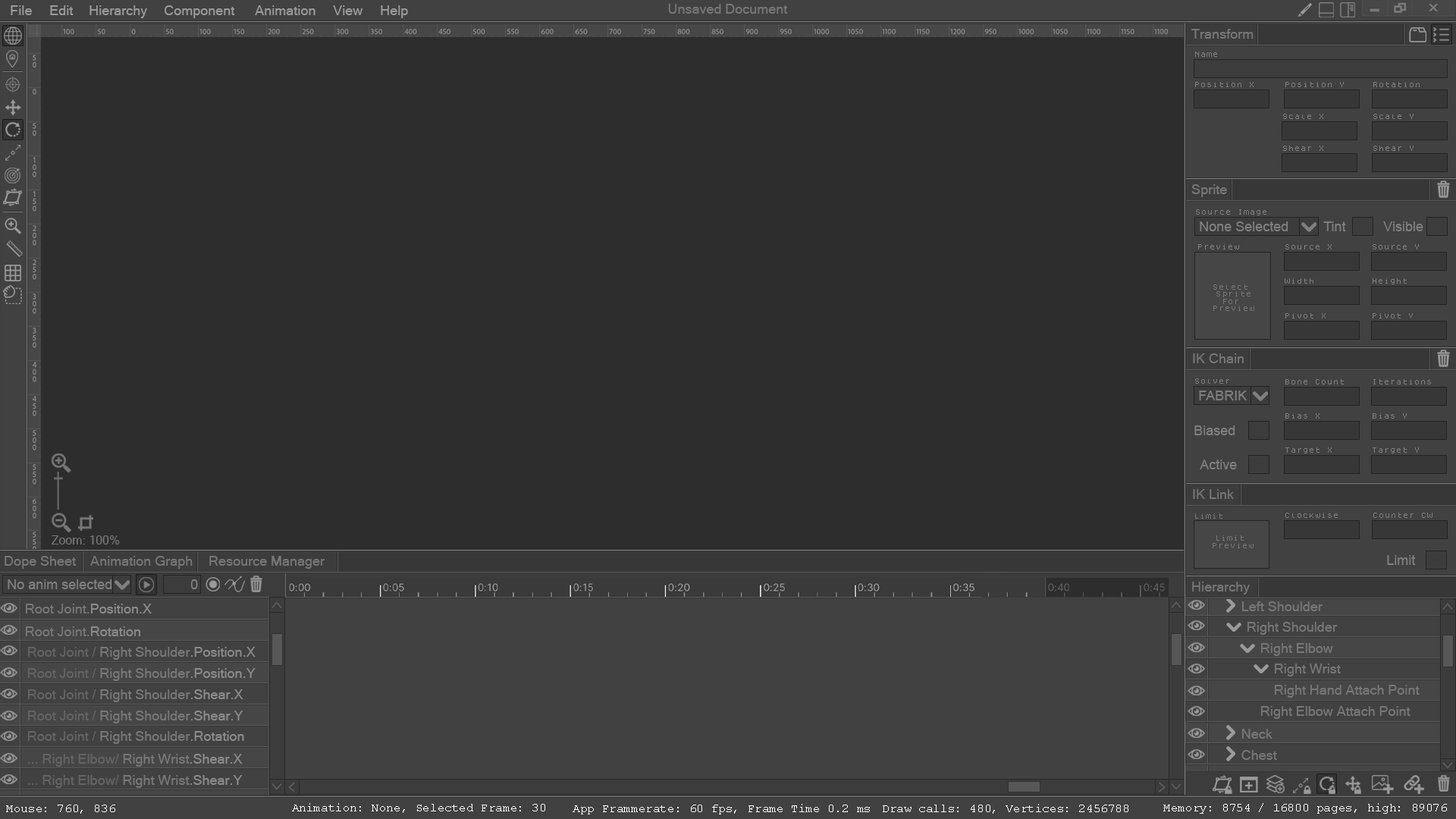
<style>
.page{position:relative;width:1456px;height:819px;background:#2d2d2d}
.page>*{position:absolute;margin:0}
.t1{font:13.6px "MicrosoftSansSerif";color:#9b9b9b}
.t2{font:13.6px "MicrosoftSansSerif";color:#777777}
.t3{font:6.1px "Dogica";color:#777777}
.t4{font:13.6px "ArialMT";color:#818080}
.t5{font:12.1px "MicrosoftSansSerif";color:#777777}
.t6{font:13.6px "MicrosoftSansSerif";color:#787878}
.t7{font:13.6px "MicrosoftSansSerif";color:#8c8c8c}
.t8{font:13.6px "MicrosoftSansSerif";color:#646464}
.t9{font:12.1px "CourierNewPSMT";color:#ffffff}
</style>
<div class="page">
<p class="t1" style="left:11px;top:5px;width:21px;height:10px">File</p>
<p class="t1" style="left:50px;top:5px;width:24px;height:10px">Edit</p>
<p class="t1" style="left:89px;top:5px;width:58px;height:13px">Hierarchy</p>
<p class="t1" style="left:165px;top:5px;width:70px;height:13px">Component</p>
<p class="t1" style="left:255px;top:5px;width:60px;height:10px">Animation</p>
<p class="t1" style="left:333px;top:5px;width:30px;height:10px">View</p>
<p class="t1" style="left:381px;top:5px;width:27px;height:13px">Help</p>
<p class="t2" style="left:668px;top:4px;width:120px;height:10px">Unsaved Document</p>
<p class="t2" style="left:1191px;top:29px;width:63px;height:10px">Transform</p>
<p class="t3" style="left:1195px;top:52px;width:22px;height:5px">Name</p>
<p class="t3" style="left:1195px;top:82px;width:59px;height:5px">Position X</p>
<p class="t3" style="left:1285px;top:82px;width:59px;height:5px">Position Y</p>
<p class="t3" style="left:1373px;top:82px;width:47px;height:5px">Rotation</p>
<p class="t3" style="left:1283px;top:114px;width:40px;height:5px">Scale X</p>
<p class="t3" style="left:1373px;top:114px;width:41px;height:5px">Scale Y</p>
<p class="t3" style="left:1283px;top:146px;width:40px;height:5px">Shear X</p>
<p class="t3" style="left:1373px;top:146px;width:41px;height:5px">Shear Y</p>
<p class="t2" style="left:1191px;top:184px;width:36px;height:13px">Sprite</p>
<p class="t3" style="left:1196px;top:209px;width:70px;height:6px">Source Image</p>
<p class="t4" style="left:1200px;top:221px;width:88px;height:10px">None Selected</p>
<p class="t4" style="left:1323px;top:221px;width:23px;height:10px">Tint</p>
<p class="t4" style="left:1383px;top:221px;width:40px;height:10px">Visible</p>
<p class="t3" style="left:1198px;top:244px;width:41px;height:5px">Preview</p>
<p class="t3" style="left:1285px;top:244px;width:47px;height:5px">Source X</p>
<p class="t3" style="left:1373px;top:244px;width:46px;height:5px">Source Y</p>
<p class="t3" style="left:1285px;top:278px;width:28px;height:6px">Width</p>
<p class="t3" style="left:1373px;top:278px;width:34px;height:6px">Height</p>
<p class="t3" style="left:1213px;top:284px;width:41px;height:27px;text-align:center">Select <br>Sprite<br>For <br>Preview</p>
<p class="t3" style="left:1285px;top:313px;width:41px;height:5px">Pivot X</p>
<p class="t3" style="left:1373px;top:313px;width:40px;height:5px">Pivot Y</p>
<p class="t2" style="left:1193px;top:353px;width:51px;height:10px">IK Chain</p>
<p class="t3" style="left:1195px;top:378px;width:34px;height:6px">Solver</p>
<p class="t3" style="left:1285px;top:379px;width:59px;height:5px">Bone Count</p>
<p class="t3" style="left:1373px;top:379px;width:58px;height:5px">Iterations</p>
<p class="t4" style="left:1199px;top:391px;width:48px;height:9px">FABRIK</p>
<p class="t3" style="left:1285px;top:413px;width:34px;height:6px">Bias X</p>
<p class="t3" style="left:1373px;top:413px;width:34px;height:6px">Bias Y</p>
<p class="t4" style="left:1194px;top:425px;width:41px;height:10px">Biased</p>
<p class="t3" style="left:1285px;top:447px;width:47px;height:6px">Target X</p>
<p class="t3" style="left:1373px;top:447px;width:46px;height:6px">Target Y</p>
<p class="t4" style="left:1200px;top:460px;width:37px;height:9px">Active</p>
<p class="t2" style="left:1193px;top:489px;width:41px;height:10px">IK Link</p>
<p class="t3" style="left:1195px;top:513px;width:27px;height:6px">Limit</p>
<p class="t3" style="left:1285px;top:513px;width:53px;height:5px">Clockwise</p>
<p class="t3" style="left:1373px;top:513px;width:59px;height:5px">Counter CW</p>
<p class="t5" style="left:51px;top:535px;width:69px;height:9px">Zoom: 100%</p>
<p class="t3" style="left:1213px;top:535px;width:41px;height:13px;text-align:center">Limit <br>Preview</p>
<p class="t2" style="left:5px;top:556px;width:71px;height:13px">Dope Sheet</p>
<p class="t2" style="left:90px;top:556px;width:103px;height:13px">Animation Graph</p>
<p class="t2" style="left:209px;top:556px;width:116px;height:13px">Resource Manager</p>
<p class="t4" style="left:1387px;top:555px;width:29px;height:10px">Limit</p>
<p class="t4" style="left:8px;top:579px;width:104px;height:10px">No anim selected</p>
<p class="t4" style="left:190px;top:579px;width:8px;height:10px">0</p>
<p class="t2" style="left:1192px;top:582px;width:58px;height:13px">Hierarchy</p>
<p class="t6" style="left:26px;top:604px;width:126px;height:9px">Root Joint.<span class="t7">Position.X</span></p>
<p class="t2" style="left:1242px;top:601px;width:81px;height:10px">Left Shoulder</p>
<p class="t6" style="left:26px;top:626px;width:114px;height:10px">Root Joint.<span class="t7">Rotation</span></p>
<p class="t2" style="left:1247px;top:622px;width:91px;height:13px">Right Shoulder</p>
<p class="t6" style="left:28px;top:647px;width:228px;height:13px"><span class="t8">Root Joint / </span>Right Shoulder<span class="t7">.Position.X</span></p>
<p class="t2" style="left:1261px;top:643px;width:72px;height:13px">Right Elbow</p>
<p class="t2" style="left:1275px;top:664px;width:66px;height:12px">Right Wrist</p>
<p class="t6" style="left:28px;top:668px;width:228px;height:13px"><span class="t8">Root Joint / </span>Right Shoulder<span class="t7">.Position.Y</span></p>
<p class="t6" style="left:28px;top:689px;width:215px;height:13px"><span class="t8">Root Joint / </span>Right Shoulder<span class="t7">.Shear.X</span></p>
<p class="t2" style="left:1275px;top:685px;width:145px;height:13px">Right Hand Attach Point</p>
<p class="t6" style="left:28px;top:711px;width:215px;height:12px"><span class="t8">Root Joint / </span>Right Shoulder<span class="t7">.Shear.Y</span></p>
<p class="t2" style="left:1261px;top:706px;width:149px;height:13px">Right Elbow Attach Point</p>
<p class="t6" style="left:28px;top:731px;width:216px;height:13px"><span class="t8">Root Joint / </span>Right Shoulder<span class="t7">.Rotation</span></p>
<p class="t2" style="left:1242px;top:729px;width:30px;height:10px">Neck</p>
<p class="t2" style="left:1241px;top:750px;width:36px;height:10px">Chest</p>
<p class="t8" style="left:28px;top:754px;width:215px;height:13px">... Right Elbow/ <span class="t6">Right Wrist</span><span class="t7">.Shear.X</span></p>
<p class="t8" style="left:28px;top:775px;width:215px;height:13px">... Right Elbow/ <span class="t6">Right Wrist</span><span class="t7">.Shear.Y</span></p>
<p class="t9" style="left:6px;top:805px;width:109px;height:9px">Mouse: 760, 836</p>
<p class="t9" style="left:292px;top:803px;width:253px;height:10px">Animation: None, Selected Frame: 30</p>
<p class="t9" style="left:573px;top:804px;width:297px;height:10px">App Frammerate: 60 fps, Frame Time 0.2 ms</p>
<p class="t9" style="left:883px;top:804px;width:245px;height:10px">Draw calls: 480, Vertices: 2456788</p>
<p class="t9" style="left:1163px;top:803px;width:284px;height:11px">Memory: 8754 / 16800 pages, high: 89076</p>
</div>
